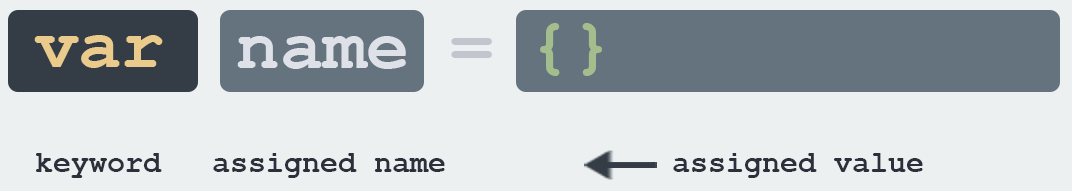
<style>
.page{position:relative;width:1072px;height:191px;background:#ecf0f1}
.page>*{position:absolute;margin:0}
.t1{font:72px "CourierNewPS-BoldMT";color:#a3be8c}
.t2{font:72px "CourierNewPS-BoldMT";color:#ebcb8b}
.t3{font:72px "CourierNewPS-BoldMT";color:#dfe1e8}
.t4{font:72px "CourierNewPS-BoldMT";color:#c0c5ce}
.t5{font:30px "CourierNewPS-BoldMT";color:#2b303b}
</style>
<div class="page">
<p class="t1" style="left:540px;top:23px;width:62px;height:53px">{}</p>
<p class="t2" style="left:34px;top:35px;width:129px;height:33px">var</p>
<p class="t3" style="left:237px;top:36px;width:169px;height:33px">name</p>
<p class="t4" style="left:451px;top:38px;width:41px;height:20px">=</p>
<p class="t5" style="left:36px;top:153px;width:126px;height:25px">keyword</p>
<p class="t5" style="left:213px;top:153px;width:232px;height:25px">assigned name</p>
<p class="t5" style="left:673px;top:153px;width:250px;height:25px">assigned value</p>
</div>
